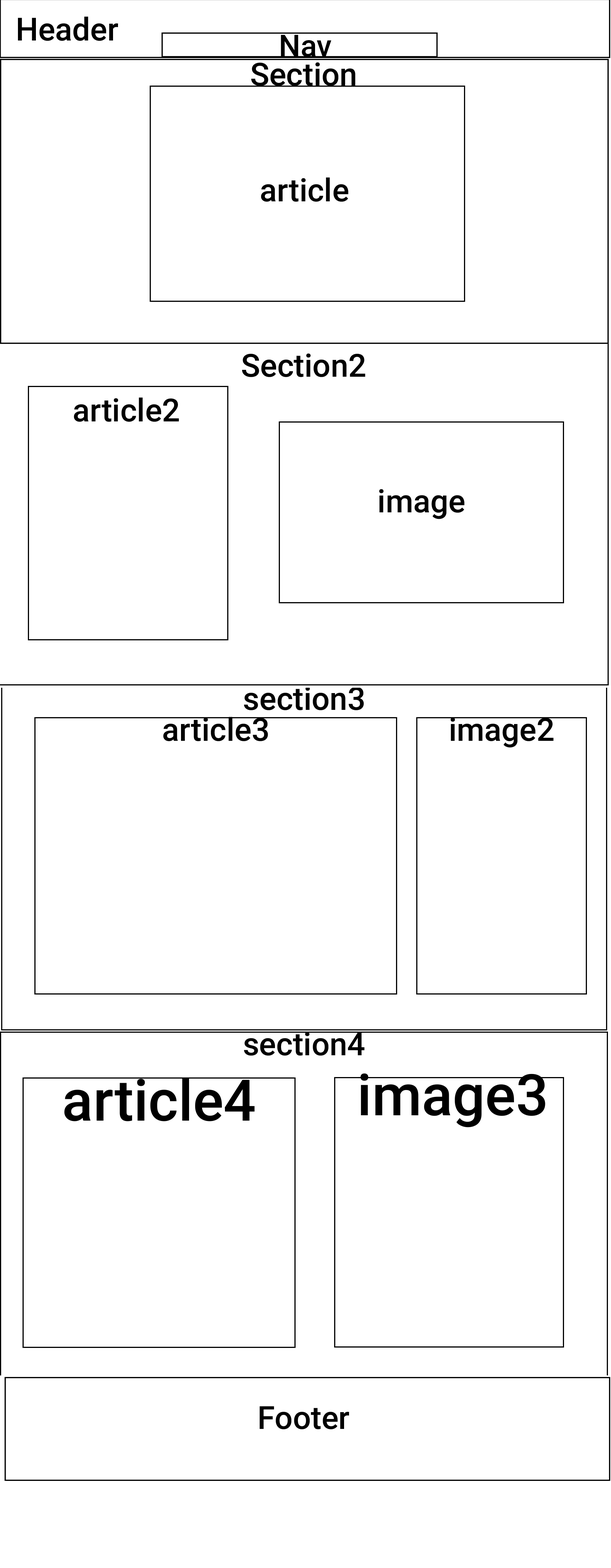
<style>
.page{position:relative;width:611px;height:1568px;background:#ffffff}
.page>*{position:absolute;margin:0}
.t1{font:31.8px "Roboto-Medium";color:#000000}
.t2{font:30.5px "Roboto-Medium";color:#000000}
.t3{font:57.3px "Roboto-Medium";color:#000000}
</style>
<div class="page">
<p class="t1" style="left:18px;top:16px;width:100px;height:25px">Header</p>
<p class="t2" style="left:281px;top:35px;width:51px;height:22px">Nav</p>
<p class="t1" style="left:251px;top:62px;width:105px;height:24px">Section</p>
<p class="t1" style="left:261px;top:177px;width:87px;height:25px">article</p>
<p class="t1" style="left:242px;top:353px;width:124px;height:24px">Section2</p>
<p class="t1" style="left:74px;top:397px;width:105px;height:25px">article2</p>
<p class="t1" style="left:379px;top:489px;width:86px;height:30px">image</p>
<p class="t1" style="left:244px;top:687px;width:120px;height:23px">section3</p>
<p class="t1" style="left:163px;top:717px;width:105px;height:24px">article3</p>
<p class="t1" style="left:451px;top:718px;width:103px;height:30px">image2</p>
<p class="t1" style="left:244px;top:1032px;width:121px;height:24px">section4</p>
<p class="t3" style="left:361px;top:1073px;width:185px;height:54px">image3</p>
<p class="t3" style="left:64px;top:1077px;width:191px;height:44px">article4</p>
<p class="t1" style="left:260px;top:1406px;width:90px;height:23px">Footer</p>
</div>
